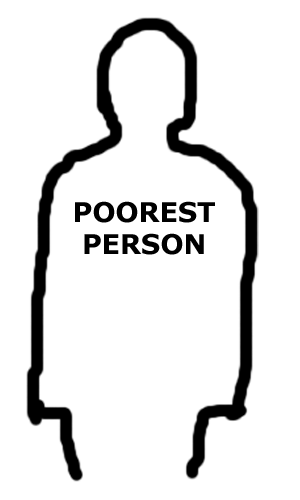
<style>
.page{position:relative;width:300px;height:500px;background:#ffffff}
.page>*{position:absolute;margin:0}
.t1{font:27px "Verdana-Bold";color:#000000}
</style>
<div class="page">
<p class="t1" style="left:75px;top:201px;width:140px;height:54px;text-align:center">POOREST <br>PERSON</p>
</div>
